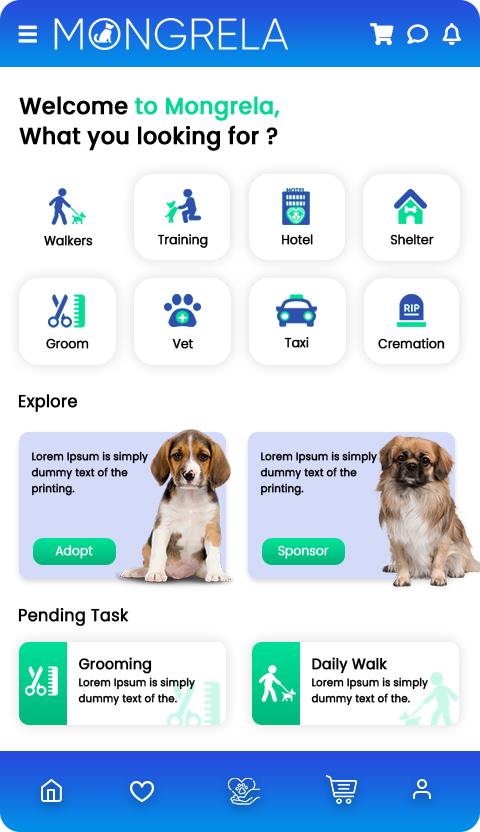
<style>
.page{position:relative;width:480px;height:832px;background:#ffffff}
.page>*{position:absolute;margin:0}
.t1{font:23.5px/30px "Poppins-Medium";color:#000000;font-weight:bold;scale:0.93 1}
.t2{font:23.5px/30px "Poppins-Medium";color:#00d993;font-weight:bold;scale:0.93 1}
.t3{font:12.8px "Poppins-Light";color:#000000;font-weight:bold;scale:0.93 1}
.t4{font:17.1px "Poppins-Regular";color:#000000;font-weight:bold;scale:0.93 1}
.t5{font:10.7px/16px "Poppins-Regular";color:#000000;font-weight:bold;scale:0.93 1}
.t6{font:12.8px "Poppins-Light";color:#ffffff;font-weight:bold;scale:0.93 1}
.t7{font:15px "Poppins-Regular";color:#000000;font-weight:bold;scale:0.93 1}
</style>
<div class="page">
<p class="t1" style="left:19px;top:96px;width:261px;height:55px">Welcome <span class="t2">to Mongrela,<br></span>What you looking for ?</p>
<p class="t3" style="left:44px;top:235px;width:49px;height:11px">Walkers</p>
<p class="t3" style="left:157px;top:234px;width:51px;height:14px">Training</p>
<p class="t3" style="left:282px;top:234px;width:31px;height:11px">Hotel</p>
<p class="t3" style="left:390px;top:234px;width:44px;height:11px">Shelter</p>
<p class="t3" style="left:46px;top:338px;width:43px;height:11px">Groom</p>
<p class="t3" style="left:172px;top:338px;width:21px;height:11px">Vet</p>
<p class="t3" style="left:284px;top:337px;width:25px;height:11px">Taxi</p>
<p class="t3" style="left:378px;top:338px;width:67px;height:11px">Cremation</p>
<p class="t4" style="left:18px;top:394px;width:60px;height:18px">Explore</p>
<p class="t5" style="left:31px;top:451px;width:117px;height:45px">Lorem Ipsum is simply dummy text of the printing.</p>
<p class="t5" style="left:260px;top:451px;width:117px;height:45px">Lorem Ipsum is simply dummy text of the printing.</p>
<p class="t6" style="left:55px;top:545px;width:38px;height:14px">Adopt</p>
<p class="t6" style="left:278px;top:545px;width:51px;height:14px">Sponsor</p>
<p class="t4" style="left:18px;top:608px;width:111px;height:18px">Pending Task</p>
<p class="t7" style="left:79px;top:657px;width:73px;height:17px">Grooming</p>
<p class="t7" style="left:312px;top:657px;width:75px;height:17px">Daily Walk</p>
<p class="t5" style="left:78px;top:677px;width:117px;height:29px">Lorem Ipsum is simply dummy text of the.</p>
<p class="t5" style="left:311px;top:677px;width:117px;height:29px">Lorem Ipsum is simply dummy text of the.</p>
</div>
